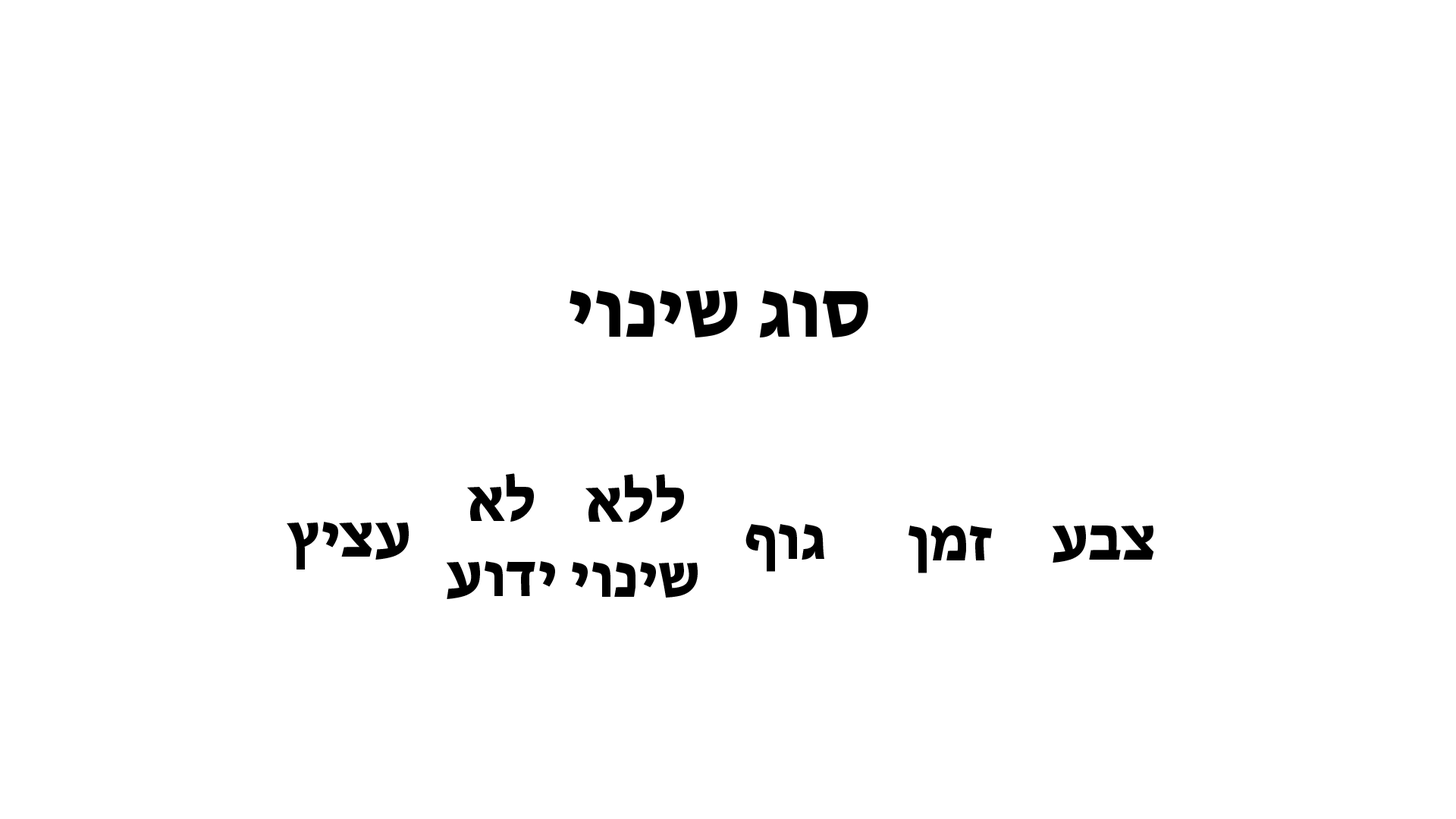
<style>
.page{position:relative;width:1456px;height:819px;background:#ffffff}
.page>*{position:absolute;margin:0}
.t1{font:83.4px "MyriadHebrew-Bold";color:#000000}
.t2{font:62.6px "MyriadHebrew-Bold";color:#000000}
</style>
<div class="page">
<p class="t1" style="left:570px;top:290px;width:298px;height:47px">סוג שינוי</p>
<p class="t2" style="left:446px;top:473px;width:109px;height:126px;text-align:center">לא<br>ידוע</p>
<p class="t2" style="left:572px;top:474px;width:126px;height:124px;text-align:center">ללא<br>שינוי</p>
<p class="t2" style="left:287px;top:522px;width:122px;height:48px">עציץ</p>
<p class="t2" style="left:745px;top:524px;width:79px;height:48px">גוף</p>
<p class="t2" style="left:908px;top:526px;width:84px;height:47px">זמן</p>
<p class="t2" style="left:1052px;top:525px;width:102px;height:38px">צבע</p>
</div>
